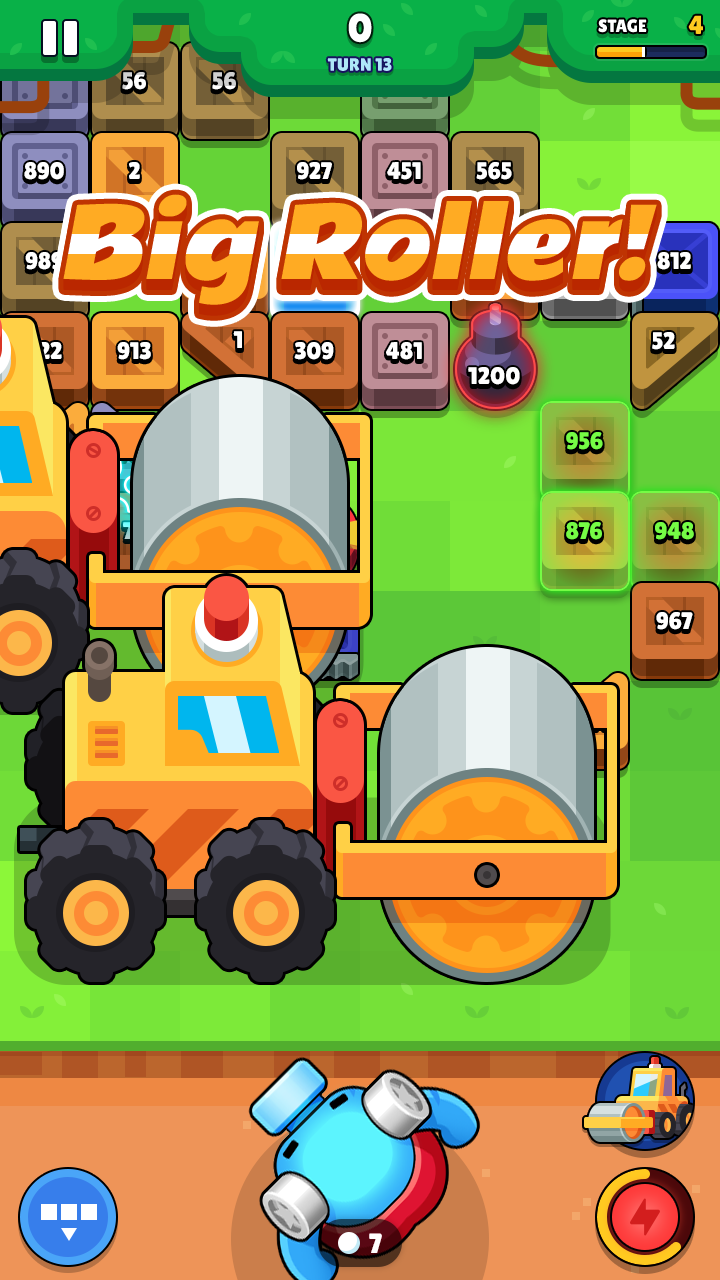
<style>
.page{position:relative;width:720px;height:1280px}
.page>*{position:absolute;margin:0}
.t1{font:24px "LilitaOne";color:#ffffff}
.t2{font:24px "LilitaOne";color:#cfcfcf}
.t3{font:24px "LilitaOne"}
.t4{font:24px "LilitaOne";letter-spacing:0.02em;color:#ffffff}
.t5{font:24px "LilitaOne";color:#75fc45}
</style>
<div class="page">
<p class="t1" style="left:122px;top:72px;width:24px;height:18px">56</p>
<p class="t2" style="left:212px;top:72px;width:24px;height:18px">56</p>
<p class="t1" style="left:24px;top:162px;width:40px;height:18px">890</p>
<p class="t1" style="left:129px;top:162px;width:11px;height:17px">2</p>
<p class="t1" style="left:297px;top:162px;width:35px;height:18px">927</p>
<p class="t1" style="left:387px;top:162px;width:34px;height:18px">451</p>
<p class="t1" style="left:476px;top:162px;width:36px;height:18px">565</p>
<p class="t1" style="left:25px;top:252px;width:38px;height:18px">989</p>
<p class="t1" style="left:657px;top:252px;width:34px;height:18px">812</p>
<p class="t3" style="left:26px;top:342px;width:36px;height:17px">722</p>
<p class="t1" style="left:117px;top:342px;width:34px;height:18px">913</p>
<p class="t1" style="left:233px;top:331px;width:9px;height:17px">1</p>
<p class="t1" style="left:294px;top:342px;width:40px;height:18px">309</p>
<p class="t4" style="left:386px;top:342px;width:36px;height:18px">481</p>
<p class="t1" style="left:652px;top:332px;width:23px;height:18px">52</p>
<p class="t4" style="left:468px;top:367px;width:52px;height:18px">1200</p>
<p class="t5" style="left:566px;top:432px;width:37px;height:18px">956</p>
<p class="t5" style="left:566px;top:522px;width:36px;height:18px">876</p>
<p class="t5" style="left:655px;top:522px;width:39px;height:18px">948</p>
<p class="t1" style="left:656px;top:612px;width:37px;height:18px">967</p>
</div>
